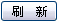
<style>
.page{position:relative;width:59px;height:23px}
.page>*{position:absolute;margin:0}
.t1{font:12px "SimSun";color:#000000}
</style>
<div class="page">
<p class="t1" style="left:12px;top:6px;width:35px;height:11px">刷  新</p>
</div>
